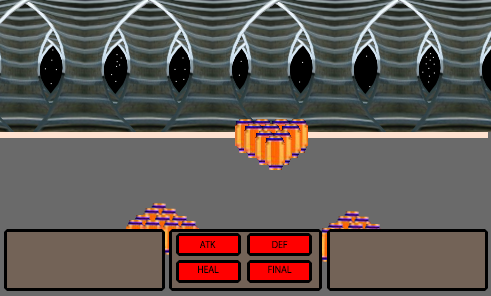
<style>
.page{position:relative;width:491px;height:296px;background:#6a6a6a}
.page>*{position:absolute;margin:0}
.t1{font:9px "KozGoPr6N-Regular";color:#000000}
</style>
<div class="page">
<p class="t1" style="left:200px;top:241px;width:16px;height:7px">ATK</p>
<p class="t1" style="left:272px;top:241px;width:16px;height:7px">DEF</p>
<p class="t1" style="left:198px;top:265px;width:21px;height:8px">HEAL</p>
<p class="t1" style="left:268px;top:265px;width:24px;height:8px">FINAL</p>
</div>
